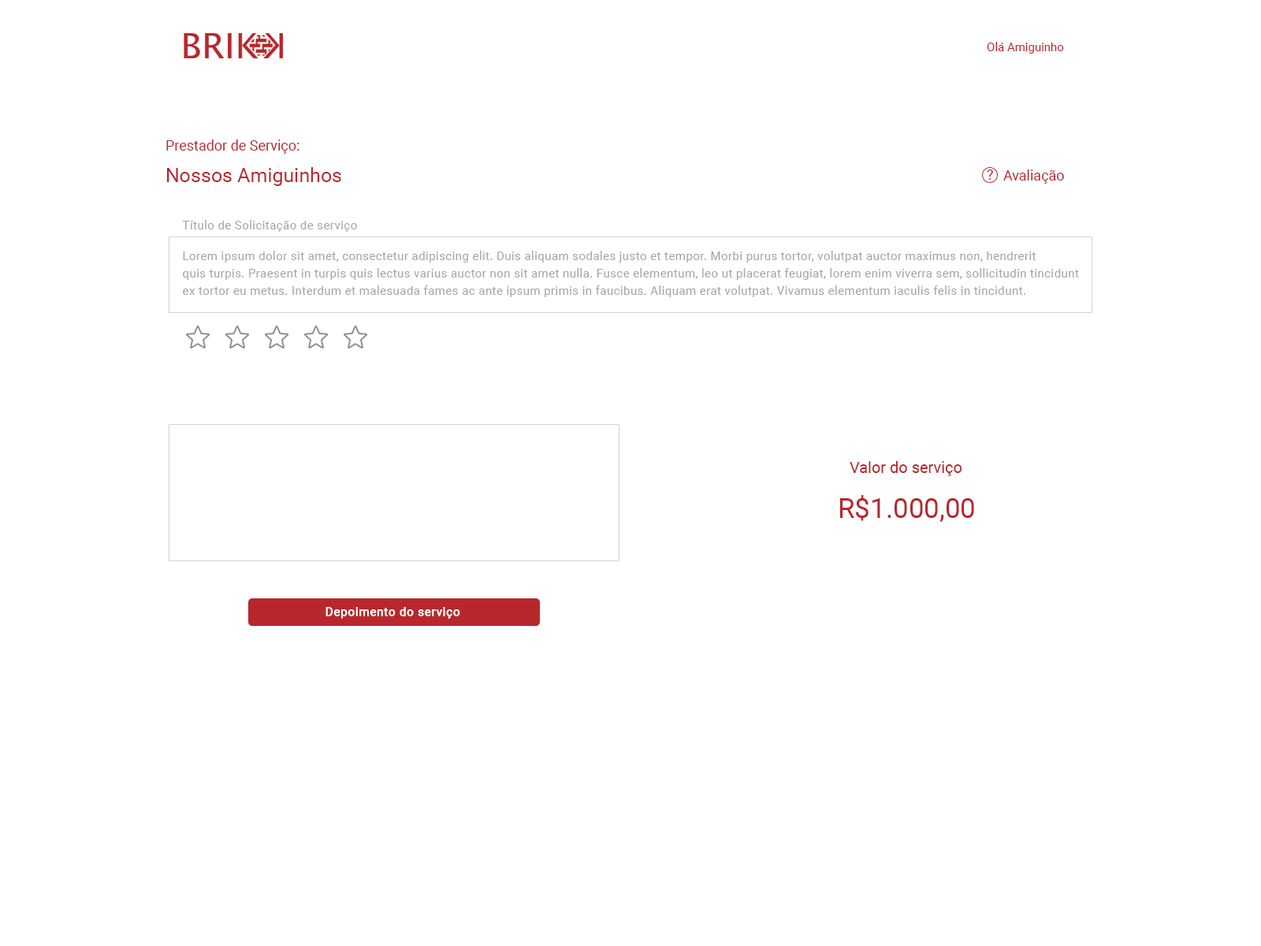
<style>
.page{position:relative;width:1261px;height:946px;background:#ffffff}
.page>*{position:absolute;margin:0}
.t1{font:11.8px "Roboto-Regular";color:#b8272c}
.t2{font:14.2px "Roboto-Regular";color:#b8272c}
.t3{font:19.7px "Roboto-Regular";color:#b8272c}
.t4{font:11.8px "Roboto-Regular";letter-spacing:0.03em;color:#a4a4a4}
.t5{font:11.8px/17.3px "Roboto-Regular";letter-spacing:0.03em;color:#a4a4a4}
.t6{font:15.8px "Roboto-Regular";color:#b8272c}
.t7{font:27.6px "Roboto-Regular";color:#b8272c}
.t8{font:11.8px "Roboto-Regular";letter-spacing:0.03em;color:#ffffff;font-weight:bold}
</style>
<div class="page">
<p class="t1" style="left:987px;top:42px;width:77px;height:12px">Olá Amiguinho</p>
<p class="t2" style="left:166px;top:139px;width:133px;height:15px">Prestador de Serviço:</p>
<p class="t3" style="left:167px;top:167px;width:174px;height:19px">Nossos Amiguinhos</p>
<p class="t2" style="left:987px;top:169px;width:6px;height:11px">?</p>
<p class="t2" style="left:1003px;top:169px;width:61px;height:15px">Avaliação</p>
<p class="t4" style="left:182px;top:220px;width:175px;height:12px">Título de Solicitação de serviço</p>
<p class="t5" style="left:183px;top:251px;width:896px;height:46px">Lorem ipsum dolor sit amet, consectetur adipiscing elit. Duis aliquam sodales justo et tempor. Morbi purus tortor, volutpat auctor maximus non, hendrerit <br>quis turpis. Praesent in turpis quis lectus varius auctor non sit amet nulla. Fusce elementum, leo ut placerat feugiat, lorem enim viverra sem, sollicitudin tincidunt <br>ex tortor eu metus. Interdum et malesuada fames ac ante ipsum primis in faucibus. Aliquam erat volutpat. Vivamus elementum iaculis felis in tincidunt.</p>
<p class="t6" style="left:850px;top:461px;width:112px;height:15px">Valor do serviço</p>
<p class="t7" style="left:839px;top:495px;width:135px;height:27px">R$1.000,00</p>
<p class="t8" style="left:325px;top:607px;width:135px;height:12px">Depoimento do serviço</p>
</div>
